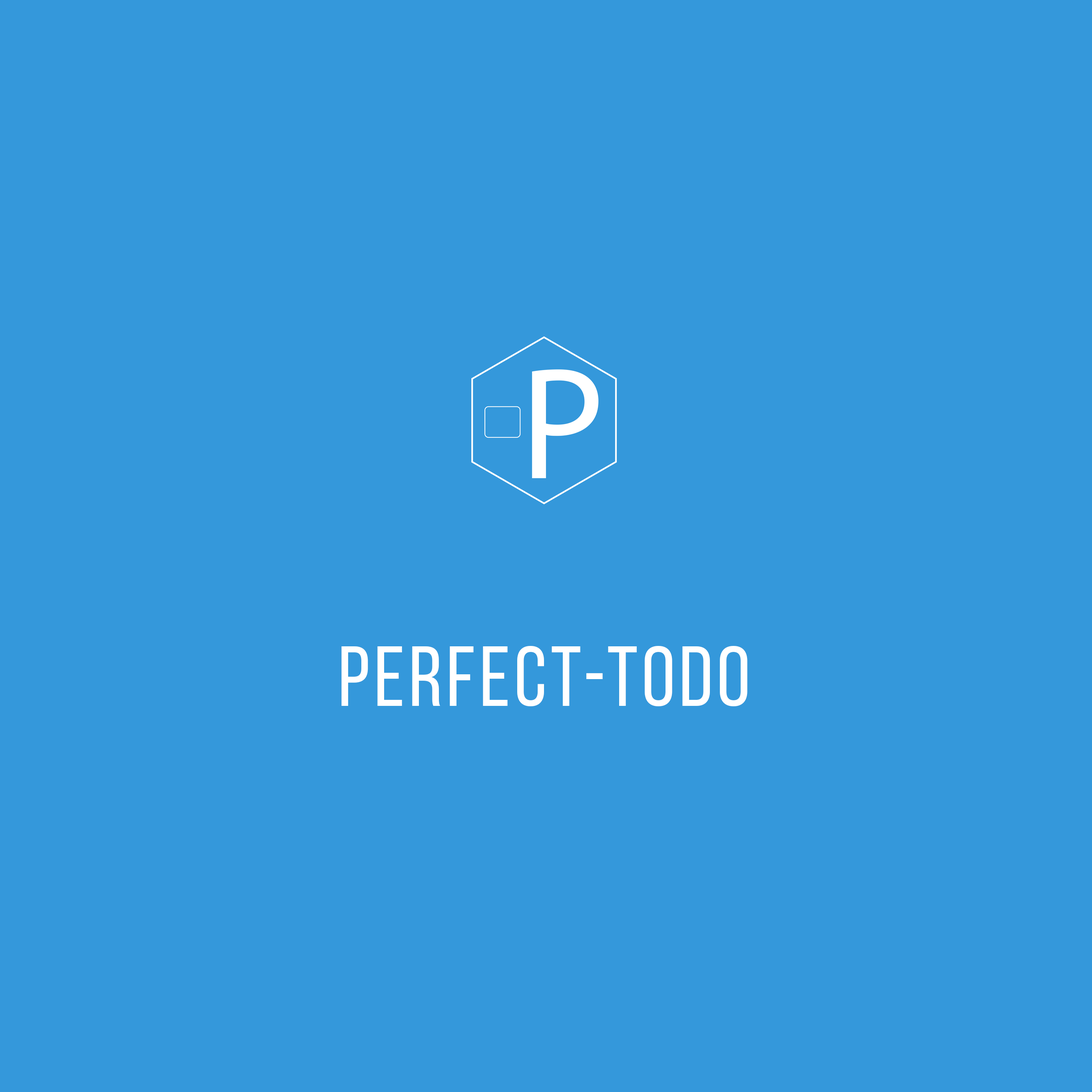
<style>
.page{position:relative;width:1092px;height:1092px;background:#3498db}
.page>*{position:absolute;margin:0}
.t1{font:84.8px "BebasNeueRegular";letter-spacing:0.05em;color:#ffffff}
</style>
<div class="page">
<p class="t1" style="left:341px;top:646px;width:406px;height:60px">Perfect-Todo</p>
</div>
